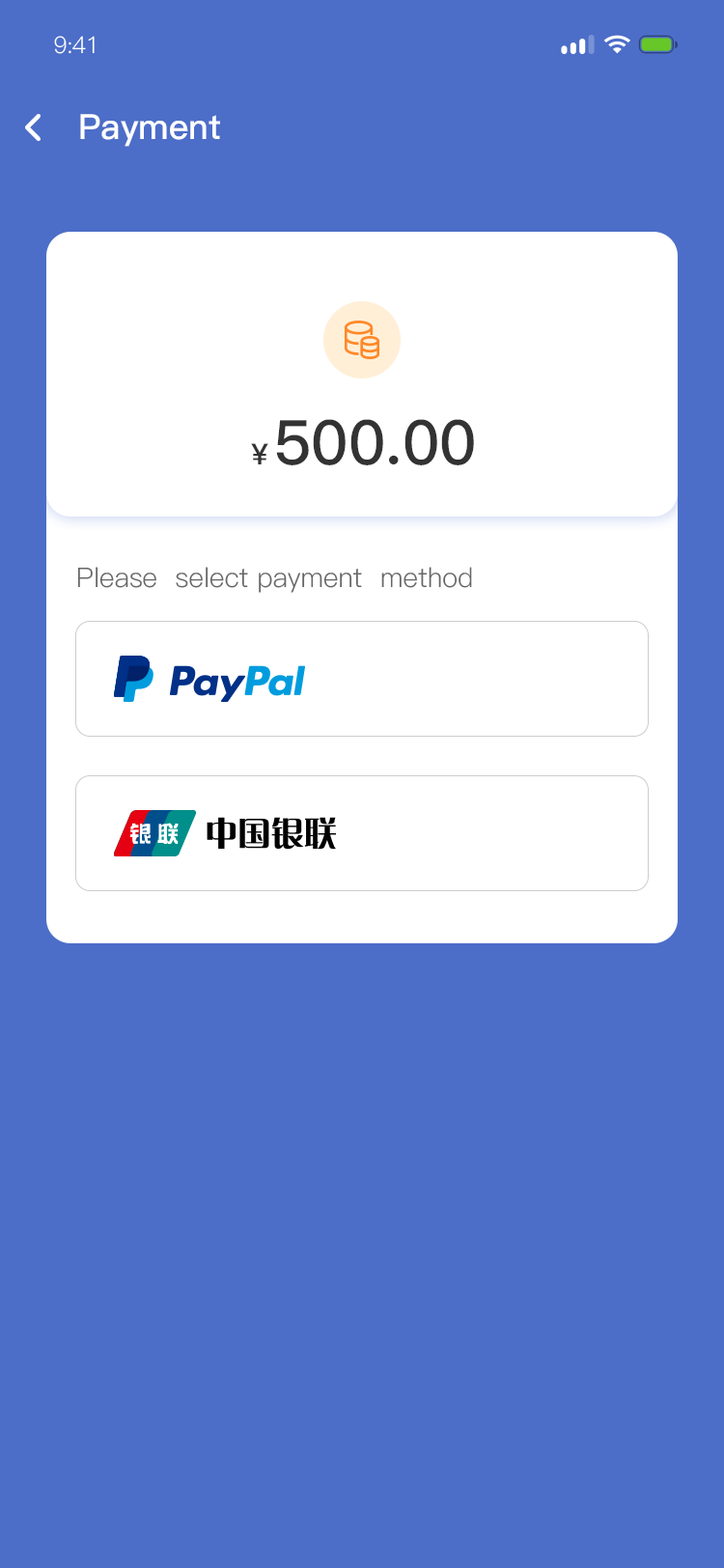
<style>
.page{position:relative;width:724px;height:1568px;background:#4c6ec8}
.page>*{position:absolute;margin:0}
.t1{font:23.2px "PingFang-SC-Regular";letter-spacing:-0.025em;color:#ffffff}
.t2{font:34.8px "PingFang-SC-Bold";color:#ffffff}
.t3{font:61.8px "PingFang-SC-Bold";color:#333333}
.t4{font:29px "PingFang-SC-Bold";color:#333333}
.t5{font:27px "PingFang-SC-Regular";color:#666666}
</style>
<div class="page">
<p class="t1" style="left:54px;top:36px;width:41px;height:18px">9:41</p>
<p class="t2" style="left:80px;top:114px;width:140px;height:33px">Payment</p>
<p class="t3" style="left:251px;top:419px;width:223px;height:46px"><span class="t4">￥</span>500.00</p>
<p class="t5" style="left:77px;top:567px;width:395px;height:26px">Please  select payment  method</p>
</div>
